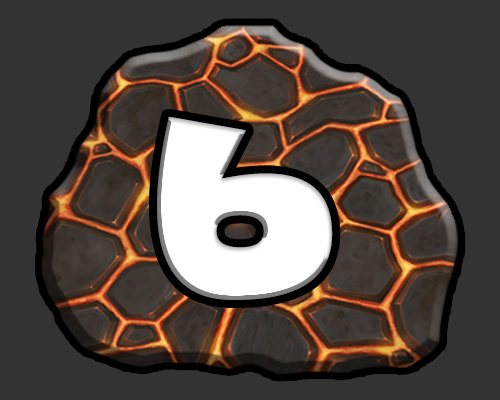
<style>
.page{position:relative;width:500px;height:400px;background:#333333}
.page>*{position:absolute;margin:0}
.t1{font:274.5px "Funhouse";color:#ffffff}
</style>
<div class="page">
<p class="t1" style="left:157px;top:116px;width:176px;height:184px">6</p>
</div>
